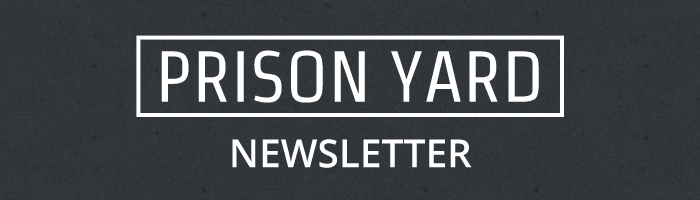
<style>
.page{position:relative;width:700px;height:200px}
.page>*{position:absolute;margin:0}
.t1{font:72px "Strait-Regular";color:#ffffff}
.t2{font:38.8px "OpenSans-Semibold";color:#ffffff}
</style>
<div class="page">
<p class="t1" style="left:161px;top:50px;width:378px;height:53px">PRISON YARD</p>
<p class="t2" style="left:232px;top:139px;width:240px;height:29px">NEWSLETTER</p>
</div>
